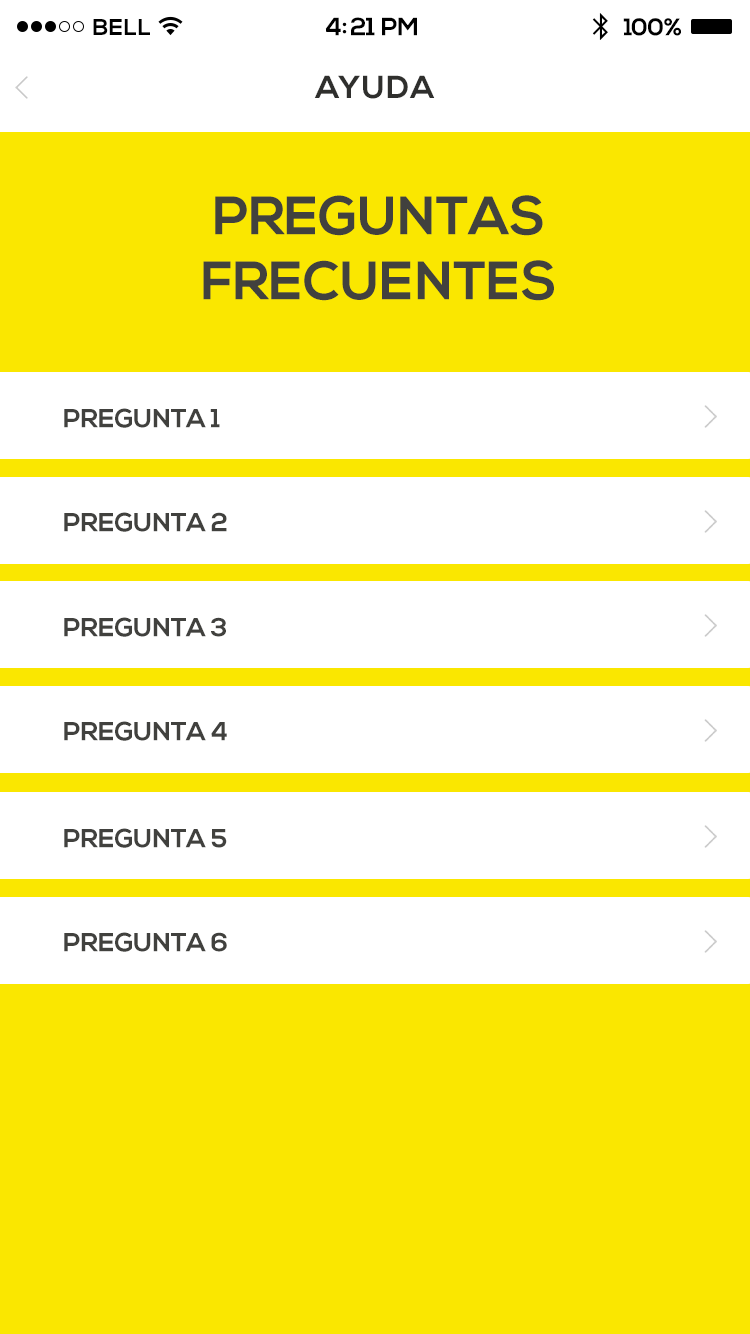
<style>
.page{position:relative;width:750px;height:1334px;background:#fae700}
.page>*{position:absolute;margin:0}
.t1{font:25px "NexaBold";letter-spacing:-0.02em;color:#000000}
.t2{font:23px "NexaBold";letter-spacing:0.02em;color:#000000}
.t3{font:24px "NexaBold";letter-spacing:-0.02em;color:#000000}
.t4{font:31.7px "NexaBold";letter-spacing:0.05em;color:#2f2f2d}
.t5{font:54px "NexaBold";color:#41413e}
.t6{font:26px "NexaBold";color:#41413e}
</style>
<div class="page">
<p class="t1" style="left:325px;top:17px;width:92px;height:19px">4:21 PM</p>
<p class="t2" style="left:93px;top:19px;width:57px;height:16px">BELL</p>
<p class="t3" style="left:623px;top:18px;width:58px;height:18px">100%</p>
<p class="t4" style="left:314px;top:75px;width:121px;height:24px">AYUDA</p>
<p class="t5" style="left:203px;top:195px;width:351px;height:106px;text-align:center">PREGUNTAS<br>FRECUENTES</p>
<p class="t6" style="left:64px;top:408px;width:156px;height:20px">PREGUNTA 1</p>
<p class="t6" style="left:64px;top:512px;width:163px;height:20px">PREGUNTA 2</p>
<p class="t6" style="left:64px;top:617px;width:162px;height:20px">PREGUNTA 3</p>
<p class="t6" style="left:64px;top:721px;width:163px;height:20px">PREGUNTA 4</p>
<p class="t6" style="left:64px;top:828px;width:163px;height:20px">PREGUNTA 5</p>
<p class="t6" style="left:64px;top:932px;width:163px;height:20px">PREGUNTA 6</p>
</div>
